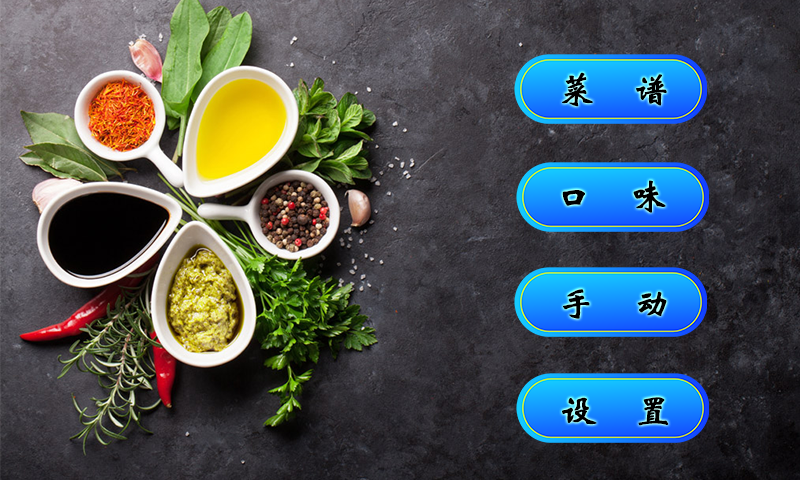
<style>
.page{position:relative;width:800px;height:480px}
.page>*{position:absolute;margin:0}
.t1{font:36px "STXinwei";letter-spacing:-0.005em;color:#000000;font-weight:bold}
.t2{font:100px "STXinwei";letter-spacing:-0.005em;color:#ff0000;font-weight:bold}
</style>
<div class="page">
<p class="t1" style="left:562px;top:72px;width:105px;height:35px"><span class="t2"> </span>菜    谱</p>
<p class="t1" style="left:562px;top:180px;width:104px;height:33px"><span class="t2"> </span>口    味</p>
<p class="t1" style="left:563px;top:289px;width:104px;height:30px"><span class="t2"> </span>手    动</p>
<p class="t1" style="left:562px;top:397px;width:107px;height:29px"><span class="t2"> </span>设    置</p>
</div>
